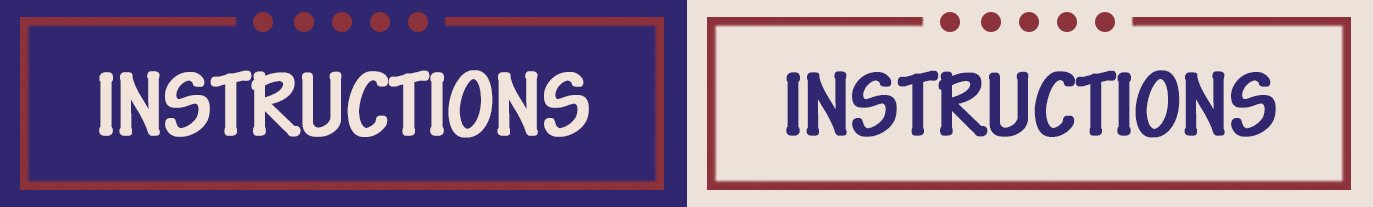
<style>
.page{position:relative;width:1373px;height:207px;background:#312770}
.page>*{position:absolute;margin:0}
.t1{font:95.6px "TektonPro-BoldCond";letter-spacing:-0.02em;color:#f2e3db;font-weight:bold}
.t2{font:95.6px "TektonPro-BoldCond";letter-spacing:-0.02em;color:#312770;font-weight:bold}
</style>
<div class="page">
<p class="t1" style="left:99px;top:70px;width:490px;height:68px">INSTRUCTIONS</p>
<p class="t2" style="left:786px;top:70px;width:490px;height:68px">INSTRUCTIONS</p>
</div>
